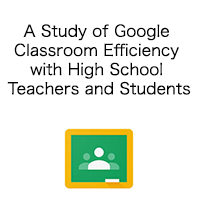
<style>
.page{position:relative;width:200px;height:200px;background:#ffffff}
.page>*{position:absolute;margin:0}
.t1{font:16px "HiraKakuPro-W3";color:#000000}
</style>
<div class="page">
<p class="t1" style="left:7px;top:24px;width:184px;height:71px;text-align:center">A Study of Google <br>Classroom Efficiency <br>with High School <br>Teachers and Students</p>
</div>
